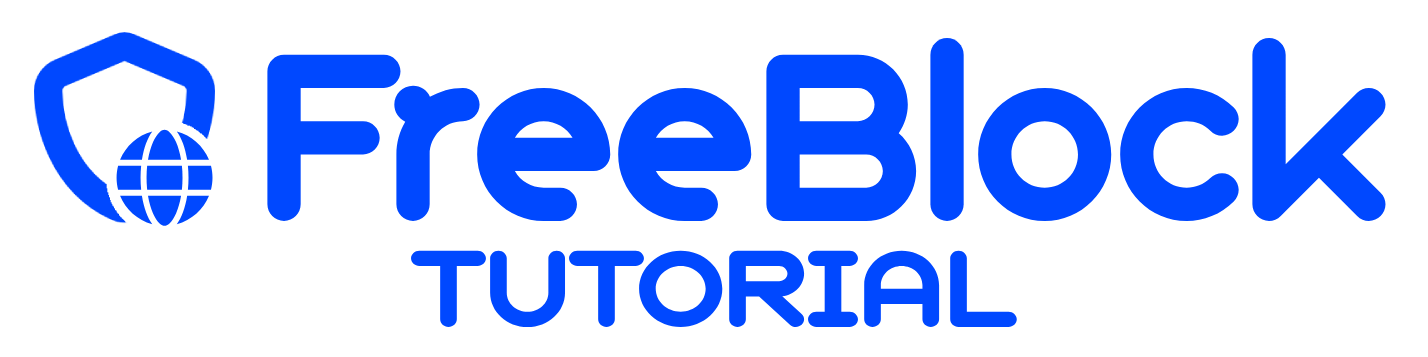
<style>
.page{position:relative;width:1428px;height:357px;background:#ffffff}
.page>*{position:absolute;margin:0}
.t1{font:259.9px "GeometrySoftPro-BoldN";color:#0048ff}
.t2{font:119.3px "GeometrySoftPro-BoldN";color:#0048ff;scale:1.09 1}
</style>
<div class="page">
<p class="t1" style="left:267px;top:38px;width:1119px;height:183px">FreeBlock</p>
<p class="t2" style="left:411px;top:250px;width:606px;height:77px">TUTORIAL</p>
</div>
